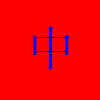
<style>
.page{position:relative;width:100px;height:100px;background:#ff0000}
.page>*{position:absolute;margin:0}
.t1{font:48px "SimSun";color:#0000ff}
</style>
<div class="page">
<p class="t1" style="left:33px;top:26px;width:37px;height:44px">中</p>
</div>
